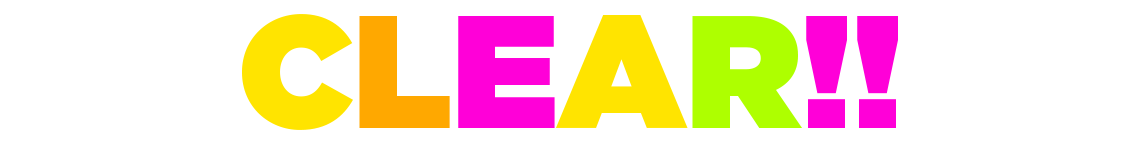
<style>
.page{position:relative;width:1140px;height:144px;background:#ffffff}
.page>*{position:absolute;margin:0}
.t1{font:160px "Gotham-Ultra";color:#ff00d8}
.t2{font:160px "Gotham-Ultra";color:#ffe400}
.t3{font:160px "Gotham-Ultra";color:#ffa800}
.t4{font:160px "Gotham-Ultra";color:#aeff00}
</style>
<div class="page">
<p class="t1" style="left:242px;top:14px;width:656px;height:116px"><span class="t2">C</span><span class="t3">L</span>E<span class="t2">A</span><span class="t4">R</span>!!</p>
</div>
